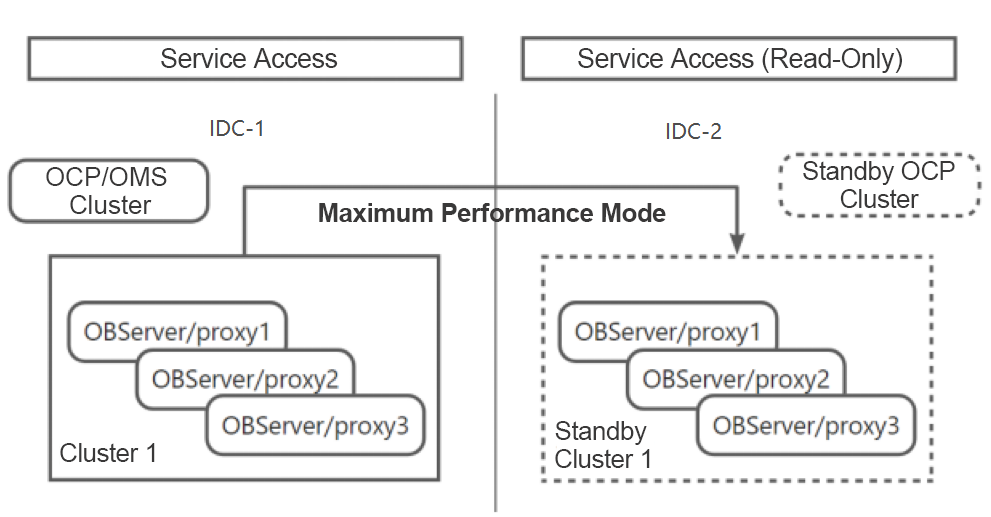
<style>
.page{position:relative;width:991px;height:517px;background:#ffffff}
.page>*{position:absolute;margin:0}
.t1{font:27px "ArialMT";letter-spacing:-0.02em;color:#393838}
.t2{font:26px/28px "ArialMT";letter-spacing:-0.02em;color:#393838}
.t3{font:26px/28px "ArialMT";color:#393838}
.t4{font:26px "Arial-BoldMT";letter-spacing:-0.02em;color:#393838}
.t5{font:26px "ArialMT";letter-spacing:-0.02em;color:#393838}
</style>
<div class="page">
<p class="t1" style="left:161px;top:48px;width:177px;height:20px">Service Access</p>
<p class="t1" style="left:578px;top:48px;width:324px;height:25px">Service Access (Read-Only)</p>
<p class="t2" style="left:803px;top:161px;width:152px;height:47px;text-align:center">Standby OCP Cluster</p>
<p class="t3" style="left:46px;top:167px;width:121px;height:47px;text-align:center">OCP/OMS <br>Cluster</p>
<p class="t4" style="left:319px;top:203px;width:347px;height:19px">Maximum Performance Mode</p>
<p class="t2" style="left:555px;top:421px;width:95px;height:47px;text-align:center">Standby <br>Cluster 1</p>
<p class="t5" style="left:60px;top:443px;width:95px;height:19px">Cluster 1</p>
</div>
